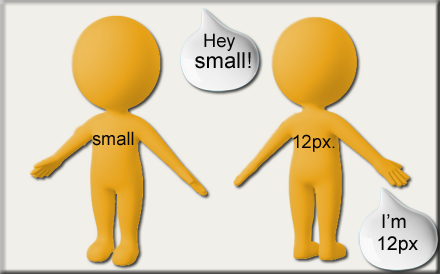
<style>
.page{position:relative;width:440px;height:274px;background:#f1efe9}
.page>*{position:absolute;margin:0}
.t1{font:18.4px "ArialMT";color:#050505}
.t2{font:22px "ArialMT";color:#050505}
.t3{font:19.3px "ArialMT";color:#050505}
</style>
<div class="page">
<p class="t1" style="left:204px;top:33px;width:31px;height:18px">Hey</p>
<p class="t2" style="left:195px;top:52px;width:56px;height:17px">small!</p>
<p class="t1" style="left:92px;top:131px;width:42px;height:15px">small</p>
<p class="t1" style="left:293px;top:134px;width:42px;height:18px">12px.</p>
<p class="t3" style="left:382px;top:214px;width:24px;height:14px">I’m</p>
<p class="t3" style="left:378px;top:236px;width:40px;height:18px">12px</p>
</div>
